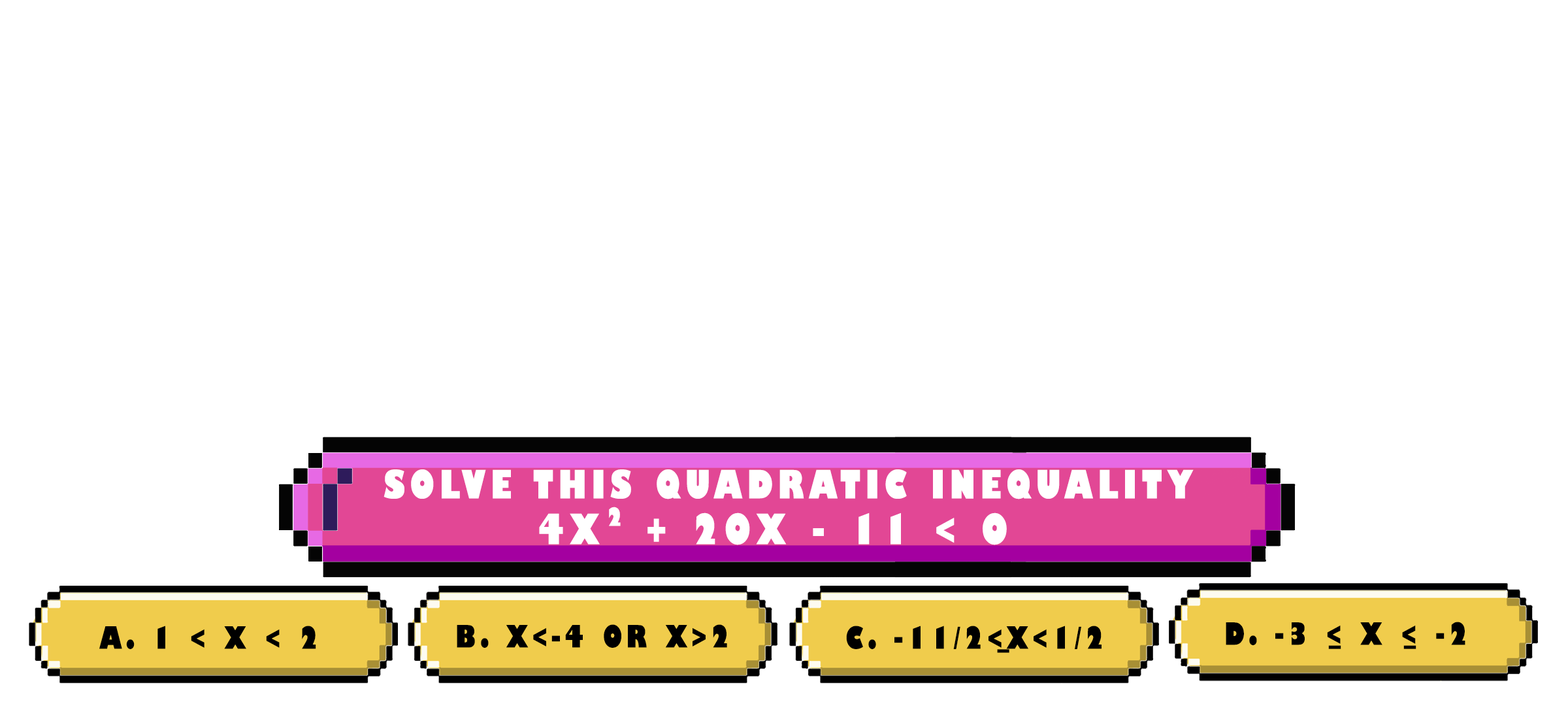
<style>
.page{position:relative;width:1568px;height:706px;background:#ffffff}
.page>*{position:absolute;margin:0}
.t1{font:38.1px "GillSans-UltraBoldCondensed";letter-spacing:0.115em;color:#ffffff;text-transform:uppercase;scale:1.12 1}
.t2{font:24.5px "GillSans-UltraBoldCondensed";letter-spacing:0.115em;color:#ffffff;text-transform:uppercase;scale:1.12 1}
.t3{font:40.8px "GillSans-UltraBoldCondensed";letter-spacing:0.115em;color:#ffffff;text-transform:uppercase;scale:1.12 1}
.t4{font:29.9px "GillSans-UltraBoldCondensed";letter-spacing:0.115em;color:#000000;text-transform:uppercase;scale:1.12 1}
</style>
<div class="page">
<p class="t1" style="left:384px;top:469px;width:810px;height:30px">solve this quadratic inequality</p>
<p class="t2" style="left:609px;top:506px;width:12px;height:20px">2</p>
<p class="t3" style="left:539px;top:512px;width:468px;height:33px">4x  + 20x - 11 &lt; 0</p>
<p class="t4" style="left:99px;top:625px;width:217px;height:24px">a. 1 &lt; x &lt; 2</p>
<p class="t4" style="left:457px;top:624px;width:270px;height:23px">b. x&lt;-4 or x&gt;2</p>
<p class="t4" style="left:846px;top:625px;width:256px;height:24px">c. -11/2&lt;x&lt;1/2</p>
<p class="t4" style="left:1226px;top:621px;width:239px;height:24px">d. -3 &lt; x &lt; -2</p>
<p class="t4" style="left:997px;top:649px;width:12px;height:4px">_</p>
<p class="t4" style="left:1328px;top:645px;width:13px;height:4px">_</p>
<p class="t4" style="left:1403px;top:645px;width:13px;height:4px">_</p>
</div>
